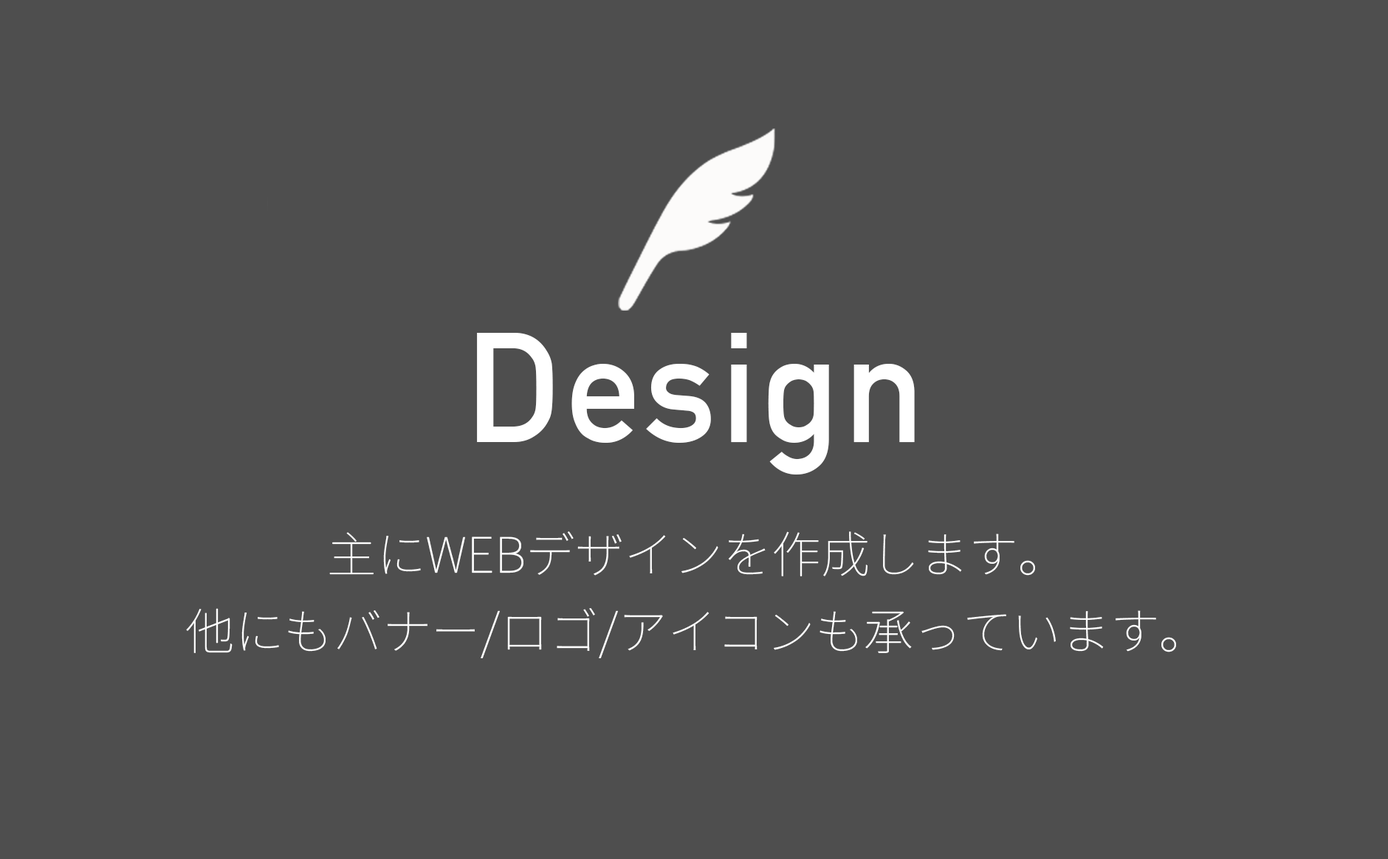
<style>
.page{position:relative;width:1388px;height:859px;background:#4e4e4e}
.page>*{position:absolute;margin:0}
.t1{font:153.2px "DINAlternate-Bold";letter-spacing:0.02em;color:#ffffff}
.t2{font:49.2px/76.9px "NotoSansJP-Thin";color:#ffffff}
</style>
<div class="page">
<p class="t1" style="left:477px;top:333px;width:438px;height:142px">Design</p>
<p class="t2" style="left:186px;top:531px;width:990px;height:127px;text-align:center">主にWEBデザインを作成します。<br>他にもバナー/ロゴ/アイコンも承っています。</p>
</div>
